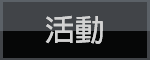
<style>
.page{position:relative;width:150px;height:60px;background:#414448}
.page>*{position:absolute;margin:0}
.t1{font:30px "AdobeFanHeitiStd-Bold";color:#d2d2d2}
</style>
<div class="page">
<p class="t1" style="left:45px;top:15px;width:58px;height:29px">活動</p>
<p class="t1" style="left:45px;top:15px;width:58px;height:29px">活動</p>
</div>
